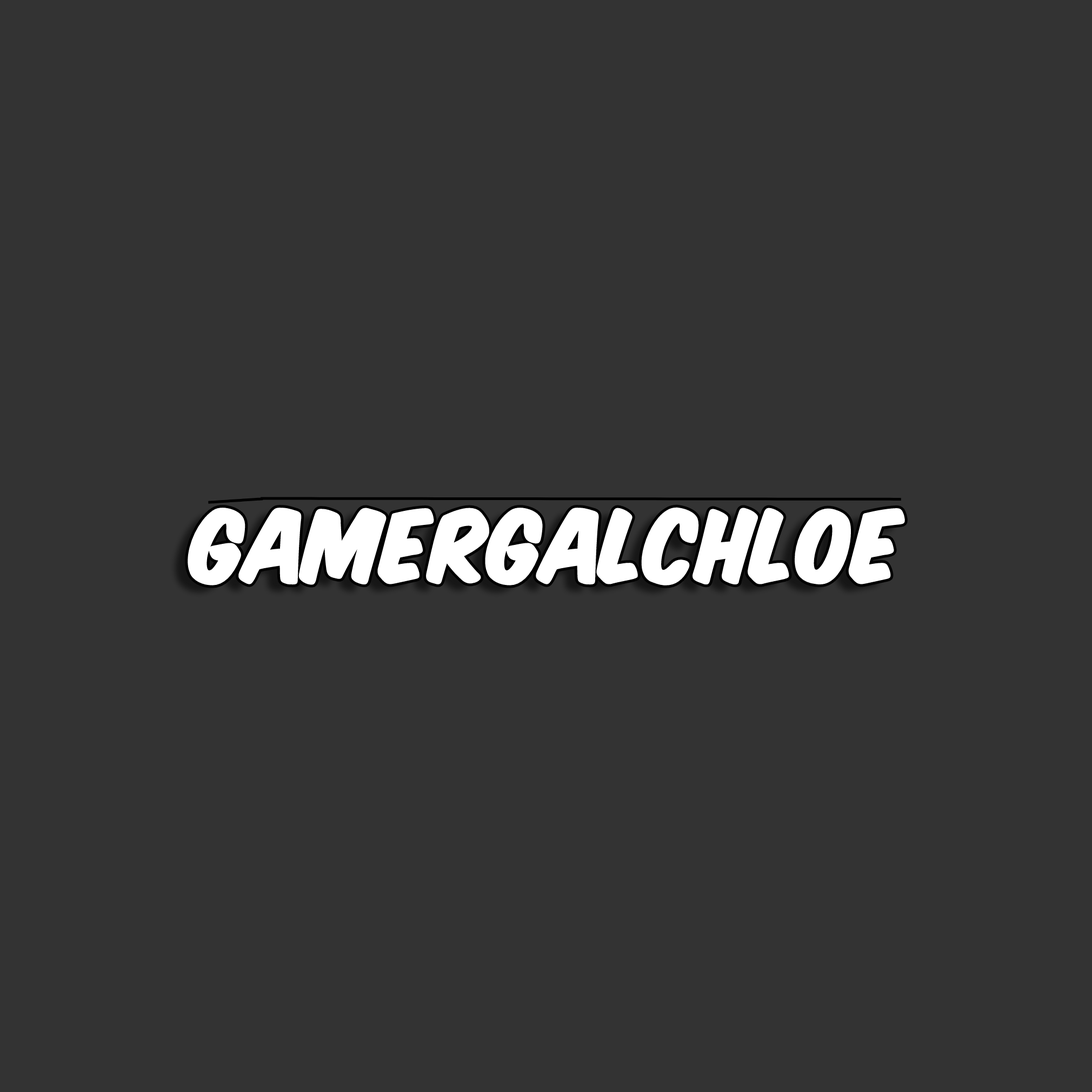
<style>
.page{position:relative;width:1092px;height:1092px;background:#333333}
.page>*{position:absolute;margin:0}
.t1{font:81.1px "KomikaTitle-Paint";color:#ffffff}
</style>
<div class="page">
<p class="t1" style="left:188px;top:507px;width:717px;height:78px">gamergalchloe</p>
</div>
